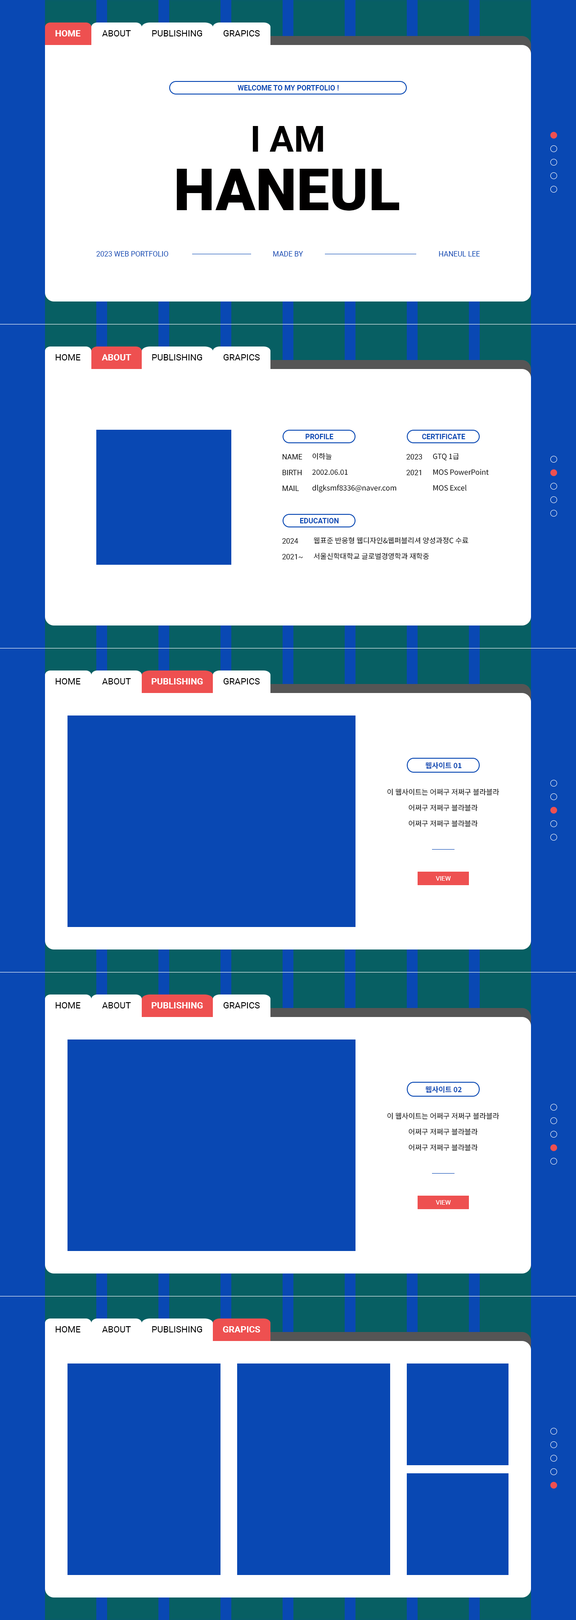
<style>
.page{position:relative;width:576px;height:1620px;background:#ffffff}
.page>*{position:absolute;margin:0}
.t1{font:9px "Roboto-Bold";color:#ffffff}
.t2{font:9px "Roboto-Regular";color:#000000}
.t3{font:7.2px "Roboto-Bold";color:#0948b3}
.t4{font:36px "Roboto-Bold";color:#010000}
.t5{font:58.5px "Roboto-Black";color:#010000}
.t6{font:7.2px "Roboto-Regular";color:#0948b3}
.t7{font:7.2px/15.8px "Roboto-Regular";color:#000000}
.t8{font:7.2px/15.8px "NotoSansKR-Regular";color:#000000}
.t9{font:7.2px "NotoSansKR-Bold";color:#0948b3}
.t10{font:6.3px "Roboto-Regular";color:#ffffff}
</style>
<div class="page">
<p class="t1" style="left:55px;top:30px;width:26px;height:6px">HOME</p>
<p class="t2" style="left:102px;top:30px;width:29px;height:6px">ABOUT</p>
<p class="t2" style="left:152px;top:30px;width:50px;height:6px">PUBLISHING</p>
<p class="t2" style="left:223px;top:30px;width:37px;height:6px">GRAPICS</p>
<p class="t3" style="left:238px;top:85px;width:101px;height:5px">WELCOME TO MY PORTFOLIO !</p>
<p class="t4" style="left:252px;top:126px;width:71px;height:26px">I AM</p>
<p class="t5" style="left:176px;top:169px;width:224px;height:42px">HANEUL</p>
<p class="t6" style="left:96px;top:251px;width:72px;height:5px">2023 WEB PORTFOLIO</p>
<p class="t6" style="left:273px;top:251px;width:30px;height:5px">MADE BY</p>
<p class="t6" style="left:439px;top:251px;width:41px;height:5px">HANEUL LEE</p>
<p class="t2" style="left:55px;top:354px;width:26px;height:6px">HOME</p>
<p class="t1" style="left:102px;top:354px;width:29px;height:6px">ABOUT</p>
<p class="t2" style="left:152px;top:354px;width:50px;height:6px">PUBLISHING</p>
<p class="t2" style="left:223px;top:354px;width:37px;height:6px">GRAPICS</p>
<p class="t3" style="left:306px;top:434px;width:27px;height:5px">PROFILE</p>
<p class="t3" style="left:422px;top:434px;width:43px;height:5px">CERTIFICATE</p>
<p class="t7" style="left:283px;top:454px;width:19px;height:37px">NAME<br>BIRTH<br>MAIL</p>
<p class="t8" style="left:312px;top:453px;width:84px;height:40px">이하늘<br>2002.06.01<br>dlgksmf8336@naver.com</p>
<p class="t7" style="left:406px;top:454px;width:16px;height:21px">2023<br>2021</p>
<p class="t8" style="left:433px;top:453px;width:56px;height:38px">GTQ 1급<br>MOS PowerPoint<br>MOS Excel</p>
<p class="t3" style="left:300px;top:518px;width:39px;height:5px">EDUCATION</p>
<p class="t7" style="left:282px;top:538px;width:21px;height:21px">2024<br>2021~</p>
<p class="t8" style="left:314px;top:537px;width:154px;height:23px">웹표준 반응형 웹디자인&amp;웹퍼블리셔 양성과정C 수료<br>서울신학대학교 글로벌경영학과 재학중</p>
<p class="t2" style="left:55px;top:678px;width:26px;height:6px">HOME</p>
<p class="t2" style="left:102px;top:678px;width:29px;height:6px">ABOUT</p>
<p class="t1" style="left:152px;top:678px;width:51px;height:6px">PUBLISHING</p>
<p class="t2" style="left:223px;top:678px;width:37px;height:6px">GRAPICS</p>
<p class="t9" style="left:425px;top:762px;width:37px;height:7px">웹사이트 01</p>
<p class="t8" style="left:387px;top:788px;width:112px;height:39px;text-align:center">이 웹사이트는 어쩌구 저쩌구 블라블라<br>어쩌구 저쩌구 블라블라<br>어쩌구 저쩌구 블라블라</p>
<p class="t10" style="left:436px;top:876px;width:15px;height:5px">VIEW</p>
<p class="t2" style="left:55px;top:1002px;width:26px;height:6px">HOME</p>
<p class="t2" style="left:102px;top:1002px;width:29px;height:6px">ABOUT</p>
<p class="t1" style="left:152px;top:1002px;width:51px;height:6px">PUBLISHING</p>
<p class="t2" style="left:223px;top:1002px;width:37px;height:6px">GRAPICS</p>
<p class="t9" style="left:425px;top:1086px;width:37px;height:7px">웹사이트 02</p>
<p class="t8" style="left:387px;top:1112px;width:112px;height:39px;text-align:center">이 웹사이트는 어쩌구 저쩌구 블라블라<br>어쩌구 저쩌구 블라블라<br>어쩌구 저쩌구 블라블라</p>
<p class="t10" style="left:436px;top:1200px;width:15px;height:5px">VIEW</p>
<p class="t2" style="left:55px;top:1326px;width:26px;height:6px">HOME</p>
<p class="t2" style="left:102px;top:1326px;width:29px;height:6px">ABOUT</p>
<p class="t2" style="left:152px;top:1326px;width:50px;height:6px">PUBLISHING</p>
<p class="t1" style="left:223px;top:1326px;width:37px;height:6px">GRAPICS</p>
</div>
